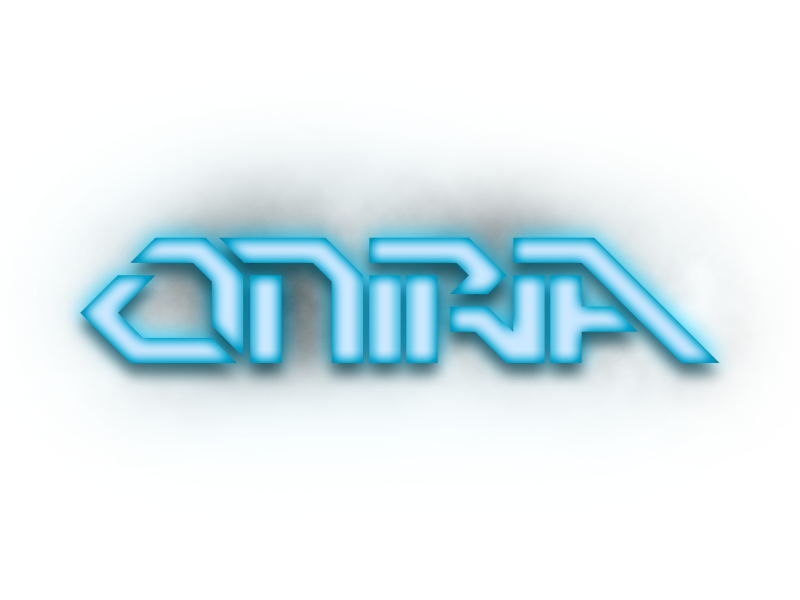
<style>
.page{position:relative;width:800px;height:600px;background:#ffffff}
.page>*{position:absolute;margin:0}
.t1{font:179.2px "PerfectDarkBRK"}
</style>
<div class="page">
<p class="t1" style="left:80px;top:237px;width:640px;height:126px">oniria</p>
</div>
